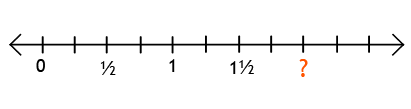
<style>
.page{position:relative;width:411px;height:109px;background:#ffffff}
.page>*{position:absolute;margin:0}
.t1{font:18px "TrebuchetMS";color:#000000}
.t2{font:20px "TrebuchetMS";color:#000000}
.t3{font:25px "TrebuchetMS";color:#ff5400}
</style>
<div class="page">
<p class="t1" style="left:36px;top:59px;width:9px;height:13px">0</p>
<p class="t2" style="left:100px;top:61px;width:16px;height:14px">½</p>
<p class="t1" style="left:169px;top:59px;width:6px;height:13px">1</p>
<p class="t1" style="left:230px;top:60px;width:24px;height:14px">1<span class="t2">½</span></p>
<p class="t3" style="left:299px;top:59px;width:9px;height:18px">?</p>
</div>
